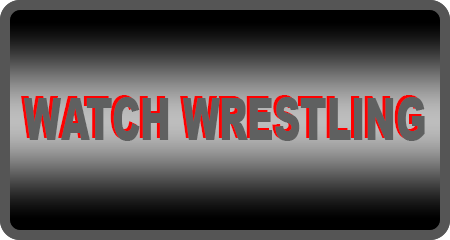
<style>
.page{position:relative;width:450px;height:240px}
.page>*{position:absolute;margin:0}
.t1{font:58.2px "Arial-Black";scale:0.63 1}
.t2{font:58.2px "Arial-Black";color:#5f6060;scale:0.63 1}
</style>
<div class="page">
<p class="t1" style="left:21px;top:95px;width:401px;height:44px">WATCH WRESTLING</p>
<p class="t2" style="left:24px;top:97px;width:401px;height:44px">WATCH WRESTLING</p>
</div>
